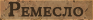
<style>
.page{position:relative;width:93px;height:20px}
.page>*{position:absolute;margin:0}
.t1{font:18.8px "CooperMediumCBT";letter-spacing:0.04em;color:#3a2b1c;font-variant:small-caps;font-weight:bold}
</style>
<div class="page">
<p class="t1" style="left:8px;top:2px;width:76px;height:15px">Ремесло</p>
</div>
